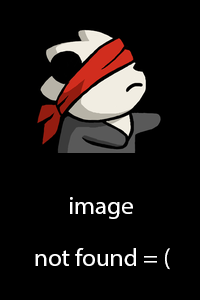
<style>
.page{position:relative;width:200px;height:300px;background:#000000}
.page>*{position:absolute;margin:0}
.t1{font:25px "MyriadPro-Regular";color:#ffffff}
</style>
<div class="page">
<p class="t1" style="left:70px;top:197px;width:63px;height:22px">image</p>
<p class="t1" style="left:35px;top:248px;width:135px;height:22px">not found = (</p>
</div>
